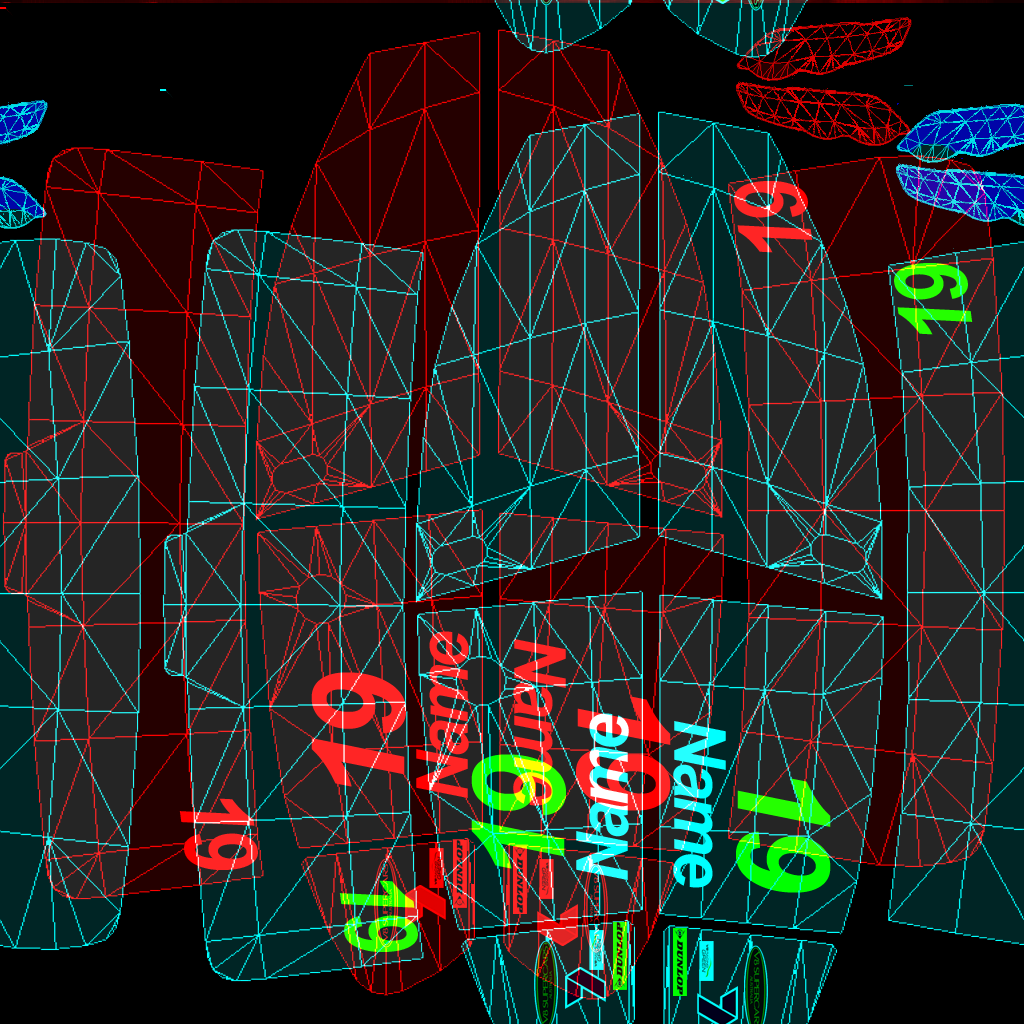
<style>
.page{position:relative;width:1024px;height:1024px;background:#252525}
.page>*{position:absolute;margin:0}
.t1{font:99.9px "Arial-BoldItalicMT";letter-spacing:-0.075em;scale:0.79 1}
.t2{font:71.9px "Arial-BoldItalicMT";letter-spacing:-0.075em;scale:0.94 1}
.t3{font:128.4px "Arial-BoldItalicMT";letter-spacing:-0.075em;color:#ff2525;scale:0.96 1}
.t4{font:128.4px "Arial-BoldItalicMT";letter-spacing:-0.075em;scale:0.96 1}
</style>
<div class="page">
<p class="t1" style="left:734px;top:178px;width:79px;height:72px;rotate:-98deg">19</p>
<p class="t2" style="left:416px;top:628px;width:53px;height:167px;rotate:-90deg">Name</p>
<p class="t2" style="left:513px;top:636px;width:53px;height:167px;rotate:90deg">Name</p>
<p class="t3" style="left:311px;top:669px;width:95px;height:115px;rotate:-90deg">19</p>
<p class="t4" style="left:576px;top:693px;width:95px;height:115px;rotate:90deg">19</p>
<p class="t1" style="left:179px;top:795px;width:79px;height:72px;rotate:82deg">19</p>
</div>
